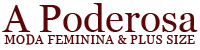
<style>
.page{position:relative;width:200px;height:50px;background:#ffffff}
.page>*{position:absolute;margin:0}
.t1{font:39px "Georgia";color:#5d060a}
.t2{font:12px "Georgia";letter-spacing:0.05em;color:#5d060a}
</style>
<div class="page">
<p class="t1" style="left:2px;top:3px;width:196px;height:29px">A Poderosa</p>
<p class="t2" style="left:4px;top:34px;width:191px;height:11px">MODA FEMININA &amp; PLUS SIZE</p>
</div>
